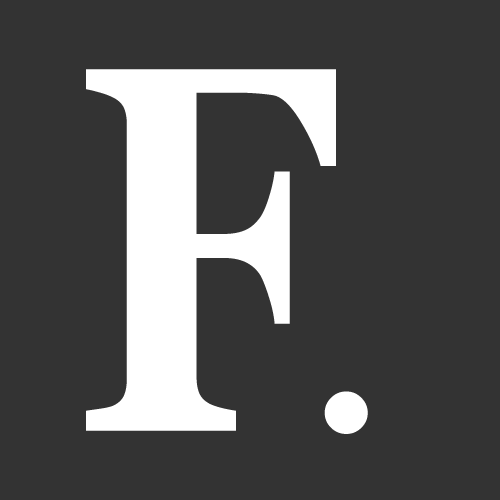
<style>
.page{position:relative;width:500px;height:500px;background:#333333}
.page>*{position:absolute;margin:0}
.t1{font:521.3px "Georgia-Bold";letter-spacing:-0.08em;color:#ffffff;scale:0.77 1}
.t2{font:221px "Georgia-Bold";letter-spacing:-0.08em;color:#ffffff}
</style>
<div class="page">
<p class="t1" style="left:86px;top:69px;width:282px;height:365px">F<span class="t2">.</span></p>
</div>
